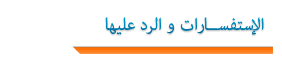
<style>
.page{position:relative;width:282px;height:69px;background:#ffffff}
.page>*{position:absolute;margin:0}
.t1{font:24px "AdobeArabic-Regular";color:#007caf}
</style>
<div class="page">
<p class="t1" style="left:105px;top:17px;width:159px;height:18px">الإستفســارات و الرد عليها</p>
</div>
